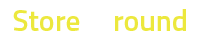
<style>
.page{position:relative;width:200px;height:44px;background:#ffffff}
.page>*{position:absolute;margin:0}
.t1{font:30px "Titillium-Semibold";color:#ece83d}
</style>
<div class="page">
<p class="t1" style="left:13px;top:9px;width:173px;height:22px">Store     round</p>
</div>
